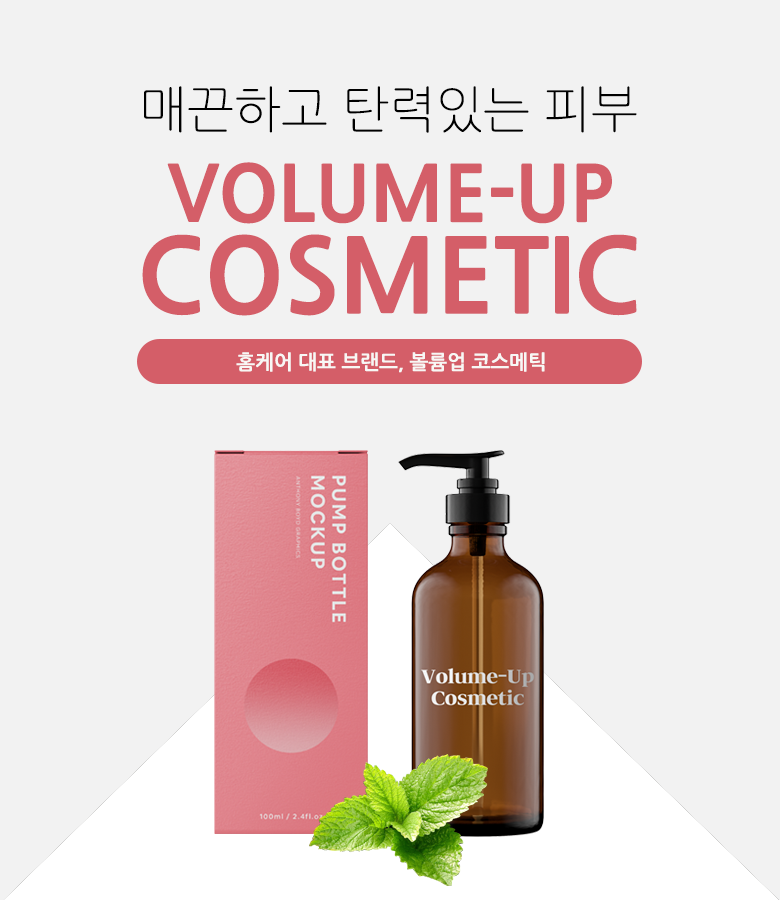
<style>
.page{position:relative;width:780px;height:900px;background:#f2f2f2}
.page>*{position:absolute;margin:0}
.t1{font:50px "NanumGothicLight";color:#000000}
.t2{font:75.9px "NanumGothicExtraBold";color:#d45e68}
.t3{font:100.7px "NanumGothicExtraBold";color:#d45e68}
.t4{font:20px "NanumGothicBold";color:#f8f7f5}
</style>
<div class="page">
<p class="t1" style="left:144px;top:86px;width:493px;height:47px">매끈하고 탄력있는 피부</p>
<p class="t2" style="left:167px;top:162px;width:445px;height:62px">VOLUME-UP</p>
<p class="t3" style="left:142px;top:234px;width:495px;height:82px">COSMETIC</p>
<p class="t4" style="left:236px;top:352px;width:309px;height:21px">홈케어 대표 브랜드, 볼륨업 코스메틱</p>
</div>
